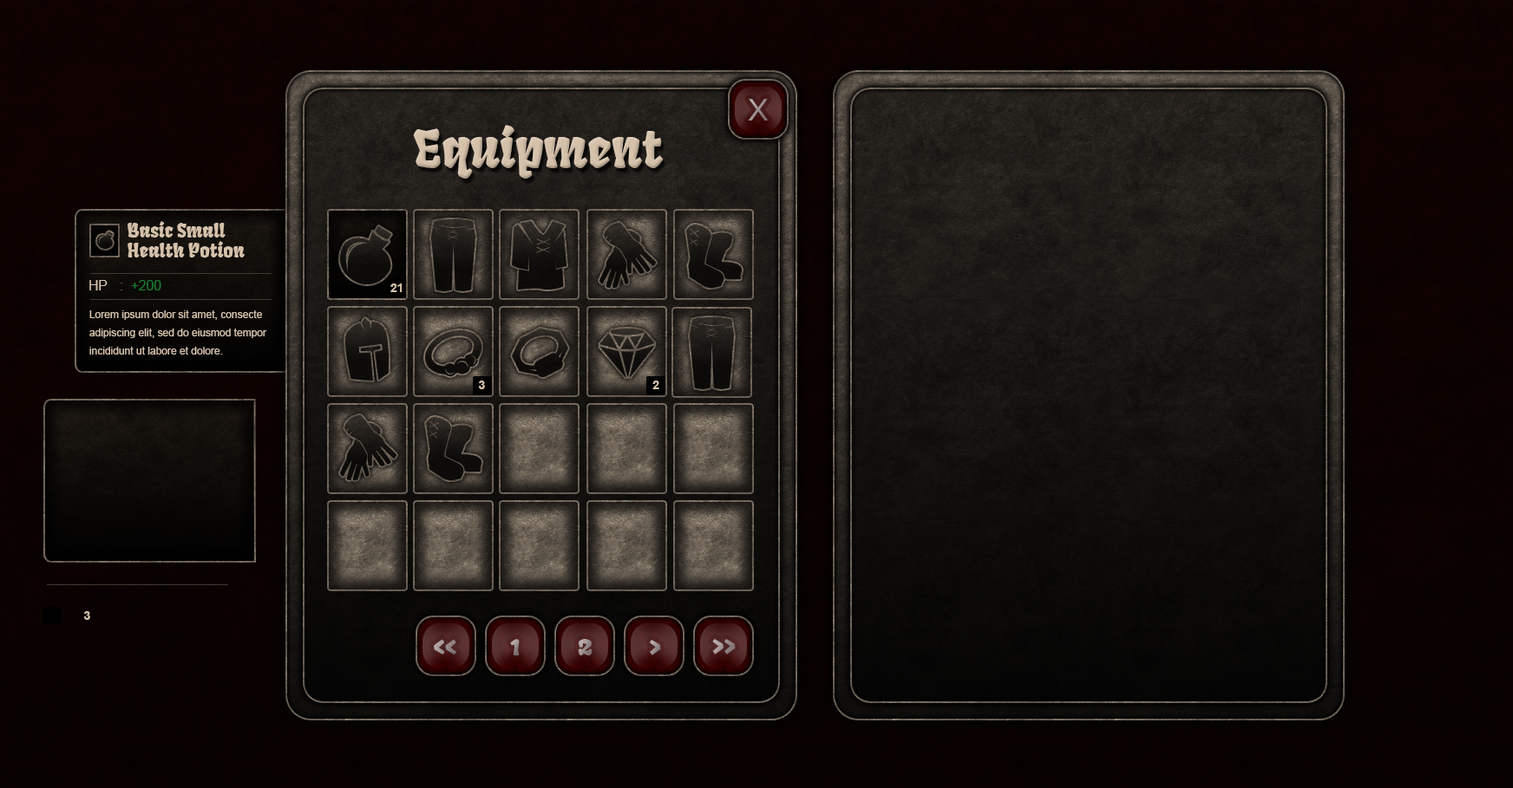
<style>
.page{position:relative;width:1513px;height:788px}
.page>*{position:absolute;margin:0}
.t1{font:41.6px "Kalinga";color:#9e9090}
.t2{font:52px "Fruktur-Regular";color:#d5c1aa}
.t3{font:19.1px/19.6px "Fruktur-Regular";color:#d5c1aa}
.t4{font:13.6px "ArialMT";color:#d5c1aa}
.t5{font:13.6px "ArialMT";color:#197b30}
.t6{font:13.6px "ArialMT";color:#736357}
.t7{font:12.1px "Arial-BoldMT";color:#d5c1aa}
.t8{font:10.4px/18.1px "ArialMT";color:#d5c1aa}
.t9{font:27.8px "Fruktur-Regular";color:#998b8b}
.t10{font:27.8px "Fruktur-Regular"}
</style>
<div class="page">
<p class="t1" style="left:748px;top:99px;width:20px;height:22px">x</p>
<p class="t2" style="left:413px;top:125px;width:250px;height:54px">Equipment</p>
<p class="t3" style="left:127px;top:221px;width:118px;height:37px">Basic Small <br>Health Potion</p>
<p class="t4" style="left:89px;top:280px;width:19px;height:11px">HP</p>
<p class="t5" style="left:131px;top:280px;width:30px;height:11px">+200</p>
<p class="t6" style="left:121px;top:283px;width:1px;height:8px">:</p>
<p class="t7" style="left:390px;top:284px;width:12px;height:8px">21</p>
<p class="t8" style="left:89px;top:310px;width:178px;height:45px">Lorem ipsum dolor sit amet, consecte<br>adipiscing elit, sed do eiusmod tempor<br>incididunt ut labore et dolore.</p>
<p class="t7" style="left:479px;top:381px;width:6px;height:8px">3</p>
<p class="t7" style="left:652px;top:381px;width:7px;height:8px">2</p>
<p class="t7" style="left:84px;top:611px;width:6px;height:9px">3</p>
<p class="t9" style="left:434px;top:639px;width:22px;height:16px">&lt;&lt;</p>
<p class="t10" style="left:510px;top:639px;width:10px;height:17px">1</p>
<p class="t10" style="left:578px;top:639px;width:14px;height:17px">2</p>
<p class="t9" style="left:650px;top:640px;width:11px;height:16px">&gt;</p>
<p class="t10" style="left:712px;top:639px;width:23px;height:16px">&gt;&gt;</p>
</div>
